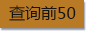
<style>
.page{position:relative;width:86px;height:31px;background:#b87a25}
.page>*{position:absolute;margin:0}
.t1{font:16px "MicrosoftYaHei";color:#141415}
</style>
<div class="page">
<p class="t1" style="left:9px;top:5px;width:67px;height:16px">查询前50</p>
</div>
